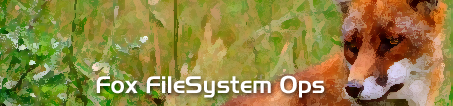
<style>
.page{position:relative;width:453px;height:106px}
.page>*{position:absolute;margin:0}
.t1{font:24px "Slicker";color:#ffffff}
</style>
<div class="page">
<p class="t1" style="left:96px;top:75px;width:229px;height:23px">Fox FileSystem Ops</p>
</div>
